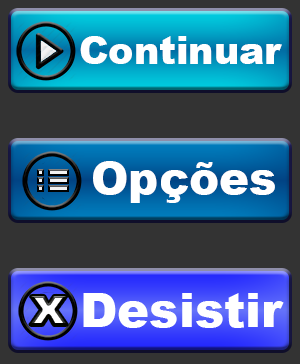
<style>
.page{position:relative;width:300px;height:364px;background:#333333}
.page>*{position:absolute;margin:0}
.t1{font:38px "Arial-Black";color:#ffffff}
.t2{font:45px "Arial-Black";color:#ffffff}
.t3{font:48px "Arial-Black";color:#ffffff}
</style>
<div class="page">
<p class="t1" style="left:80px;top:36px;width:202px;height:28px">Continuar</p>
<p class="t2" style="left:93px;top:161px;width:182px;height:42px">Opções</p>
<p class="t3" style="left:83px;top:293px;width:201px;height:35px">Desistir</p>
</div>
